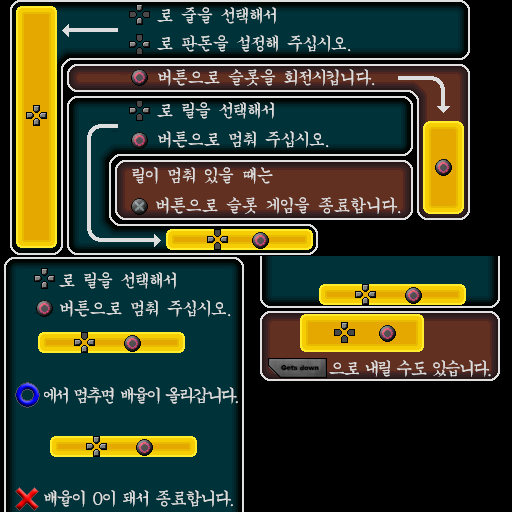
<style>
.page{position:relative;width:512px;height:512px;background:#003339}
.page>*{position:absolute;margin:0}
.t1{font:19px "KoreanGS-B";color:#dddddd}
.t2{font:19px "KoreanGS-B";letter-spacing:-0.075em;color:#dddddd}
.t3{font:19px "KoreanGS-B";letter-spacing:-0.1em;color:#dddddd}
.t4{font:19px "KoreanGS-B";letter-spacing:-0.05em;color:#dddddd}
</style>
<div class="page">
<p class="t1" style="left:157px;top:7px;width:119px;height:17px">로 줄을 선택해서</p>
<p class="t1" style="left:157px;top:35px;width:194px;height:17px">로 판돈을 설정해 주십시오.</p>
<p class="t1" style="left:158px;top:69px;width:217px;height:17px">버튼으로 슬롯을 회전시킵니다.</p>
<p class="t1" style="left:157px;top:102px;width:117px;height:17px">로 릴을 선택해서</p>
<p class="t1" style="left:158px;top:131px;width:171px;height:17px">버튼으로 멈춰 주십시오.</p>
<p class="t1" style="left:132px;top:167px;width:141px;height:17px">릴이 멈춰 있을 때는</p>
<p class="t1" style="left:156px;top:197px;width:245px;height:17px">버튼으로 슬롯 게임을 종료합니다.</p>
<p class="t1" style="left:59px;top:272px;width:117px;height:17px">로 릴을 선택해서</p>
<p class="t1" style="left:60px;top:300px;width:171px;height:17px">버튼으로 멈춰 주십시오.</p>
<p class="t2" style="left:329px;top:360px;width:162px;height:17px">으로 내릴 수도 있습니다.</p>
<p class="t3" style="left:44px;top:387px;width:194px;height:17px">에서 멈추면 배율이 올라갑니다.</p>
<p class="t4" style="left:44px;top:490px;width:189px;height:17px">배율이 0이 돼서 종료합니다.</p>
</div>
